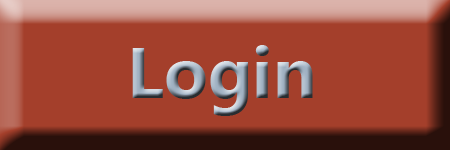
<style>
.page{position:relative;width:450px;height:150px;background:#a43f2b}
.page>*{position:absolute;margin:0}
.t1{font:72px "NirmalaUI-Bold"}
</style>
<div class="page">
<p class="t1" style="left:132px;top:45px;width:181px;height:71px">Login</p>
</div>
